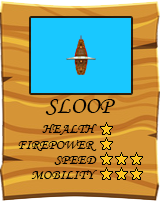
<style>
.page{position:relative;width:160px;height:202px;background:#19c8ff}
.page>*{position:absolute;margin:0}
.t1{font:24px "MonotypeCorsiva";color:#010101}
.t2{font:14px "MonotypeCorsiva";color:#000000}
</style>
<div class="page">
<p class="t1" style="left:45px;top:99px;width:70px;height:16px">SLOOP</p>
<p class="t2" style="left:42px;top:124px;width:55px;height:11px">HEALTH</p>
<p class="t2" style="left:18px;top:140px;width:79px;height:11px">FIREPOWER</p>
<p class="t2" style="left:54px;top:156px;width:43px;height:9px">SPEED</p>
<p class="t2" style="left:31px;top:170px;width:66px;height:10px">MOBILITY</p>
</div>
